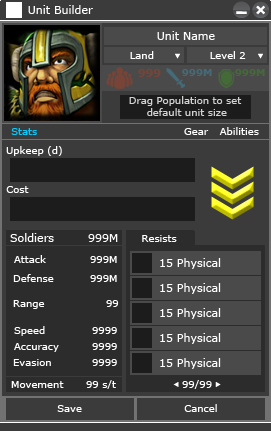
<style>
.page{position:relative;width:271px;height:431px;background:#3b3b3b}
.page>*{position:absolute;margin:0}
.t1{font:11px "Verdana";color:#ffffff}
.t2{font:11px "Verdana";color:#fffeff}
.t3{font:10px "Verdana";color:#ffffff}
.t4{font:11px "Verdana-Bold";color:#774437}
.t5{font:10px "Verdana-Bold";color:#446b77}
.t6{font:10px "Verdana-Bold";color:#446b37}
.t7{font:10px/12px "Verdana";color:#d2d2d2}
.t8{font:10px "Verdana";color:#00ccff}
.t9{font:10px "Verdana";color:#feffff}
</style>
<div class="page">
<p class="t1" style="left:28px;top:5px;width:65px;height:9px">Unit Builder</p>
<p class="t2" style="left:157px;top:31px;width:58px;height:9px">Unit Name</p>
<p class="t3" style="left:130px;top:51px;width:24px;height:8px">Land</p>
<p class="t3" style="left:210px;top:51px;width:36px;height:8px">Level 2</p>
<p class="t4" style="left:138px;top:69px;width:23px;height:8px">999</p>
<p class="t5" style="left:182px;top:69px;width:30px;height:7px">999M</p>
<p class="t6" style="left:235px;top:69px;width:30px;height:7px">999M</p>
<p class="t7" style="left:129px;top:96px;width:113px;height:20px;text-align:center">Drag Population to set<br> default unit size</p>
<p class="t8" style="left:11px;top:128px;width:26px;height:7px">Stats</p>
<p class="t3" style="left:184px;top:128px;width:25px;height:7px">Gear</p>
<p class="t3" style="left:219px;top:127px;width:40px;height:8px">Abilities</p>
<p class="t3" style="left:6px;top:146px;width:56px;height:10px">Upkeep (d)</p>
<p class="t3" style="left:6px;top:186px;width:23px;height:7px">Cost</p>
<p class="t1" style="left:10px;top:233px;width:44px;height:9px">Soldiers</p>
<p class="t1" style="left:88px;top:234px;width:30px;height:8px">999M</p>
<p class="t9" style="left:142px;top:235px;width:35px;height:7px">Resists</p>
<p class="t3" style="left:14px;top:255px;width:32px;height:8px">Attack</p>
<p class="t3" style="left:90px;top:256px;width:27px;height:7px">999M</p>
<p class="t1" style="left:160px;top:258px;width:61px;height:11px">15 Physical</p>
<p class="t3" style="left:13px;top:274px;width:41px;height:8px">Defense</p>
<p class="t3" style="left:90px;top:275px;width:27px;height:7px">999M</p>
<p class="t1" style="left:160px;top:283px;width:61px;height:11px">15 Physical</p>
<p class="t3" style="left:13px;top:300px;width:32px;height:9px">Range</p>
<p class="t3" style="left:106px;top:300px;width:13px;height:7px">99</p>
<p class="t1" style="left:160px;top:308px;width:61px;height:11px">15 Physical</p>
<p class="t3" style="left:14px;top:326px;width:31px;height:10px">Speed</p>
<p class="t3" style="left:92px;top:327px;width:25px;height:7px">9999</p>
<p class="t1" style="left:160px;top:333px;width:61px;height:11px">15 Physical</p>
<p class="t3" style="left:14px;top:343px;width:45px;height:9px">Accuracy</p>
<p class="t3" style="left:92px;top:343px;width:25px;height:7px">9999</p>
<p class="t3" style="left:13px;top:359px;width:38px;height:7px">Evasion</p>
<p class="t3" style="left:92px;top:359px;width:25px;height:7px">9999</p>
<p class="t1" style="left:160px;top:358px;width:61px;height:11px">15 Physical</p>
<p class="t3" style="left:11px;top:381px;width:53px;height:7px">Movement</p>
<p class="t3" style="left:86px;top:380px;width:30px;height:9px">99 s/t</p>
<p class="t3" style="left:182px;top:380px;width:30px;height:9px">99/99</p>
<p class="t3" style="left:57px;top:405px;width:25px;height:7px">Save</p>
<p class="t3" style="left:184px;top:404px;width:33px;height:8px">Cancel</p>
</div>
